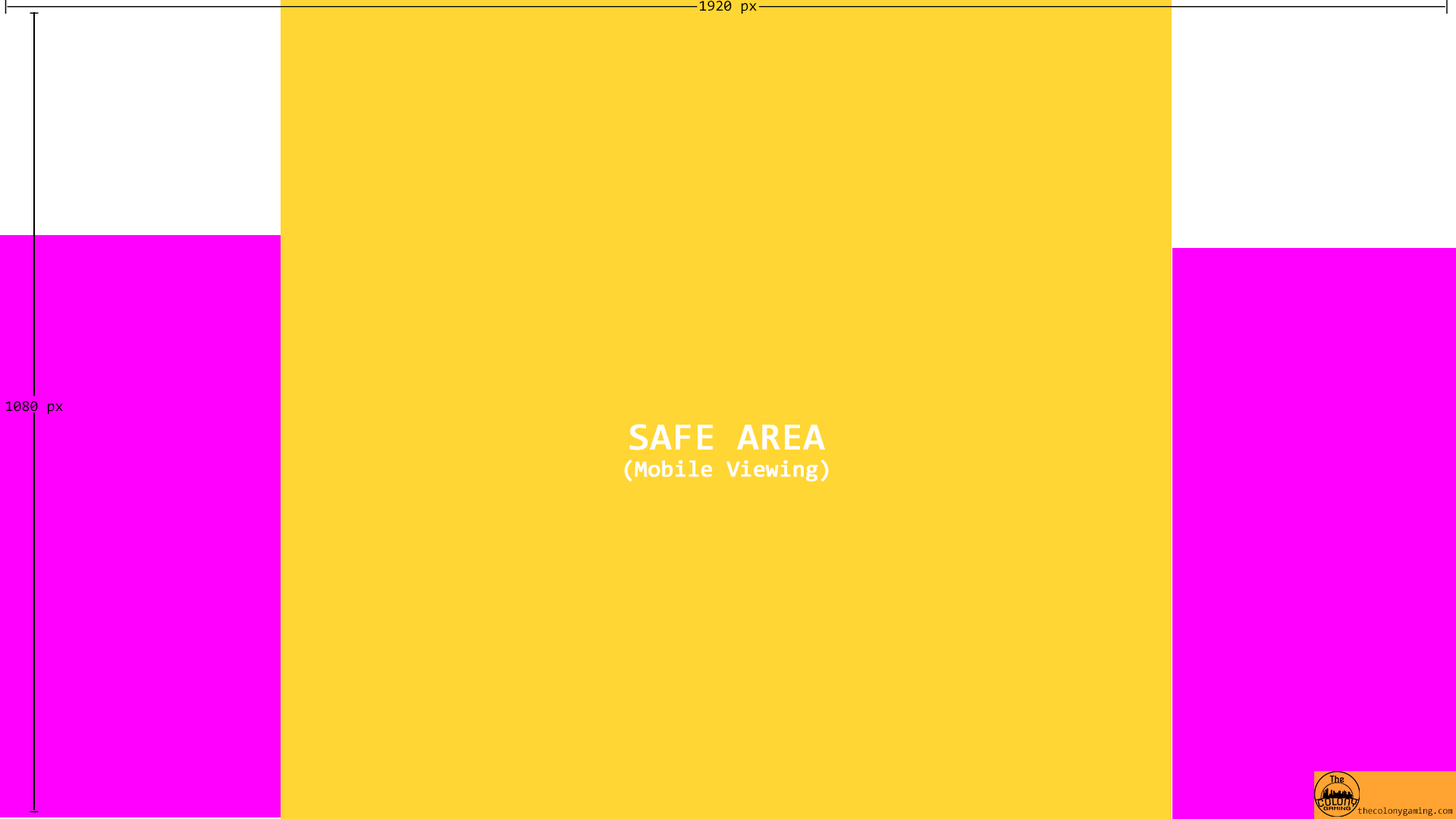
<style>
.page{position:relative;width:1456px;height:819px;background:#ffd633}
.page>*{position:absolute;margin:0}
.t1{font:15.2px "Consolas";letter-spacing:-0.3em;color:#000000}
.t2{font:15.2px "Consolas";color:#000000}
.t3{font:15.2px/13.6px "Consolas";color:#000000;font-weight:bold}
.t4{font:15.2px/2.3px "Consolas";color:#000000;font-weight:bold}
.t5{font:22.7px "Consolas";color:#ffffff;font-weight:bold}
.t6{font:37.9px/13.6px "Consolas";color:#ffffff;font-weight:bold}
.t7{font:9.1px "Consolas";color:#000000}
</style>
<div class="page">
<p class="t1" style="left:5px;top:0px;width:1443px;height:14px">|-------------------------------------------------------------------------------------------------------------------------------------------------------------------------------------- <span class="t2">1920 px</span>-------------------------------------------------------------------------------------------------------------------------------------------------------------------------------------|</p>
<p class="t3" style="left:5px;top:12px;width:58px;height:801px;text-align:center"><span class="t2">_<br></span>|<br>|<br>|<br>|<br>|<br>|<br>|<br>|<br>|<br>|<br>|<br>|<br>|<br>|<br>|<br>|<br>|<br>|<br>|<br>|<br>|<br>|<br>|<br>|<br>|<br>|<br>|<br>|<br><span class="t2">1080 px<br></span>|<br>|<br>|<br>|<br>|<br>|<br>|<br>|<br>|<br>|<br>|<br>|<br>|<br>|<br>|<br>|<br>|<br>|<br>|<br>|<br>|<br>|<br>|<br>|<br>|<br>|<br>|<br>|<br>|<br><span class="t4">_</span></p>
<p class="t5" style="left:624px;top:424px;width:205px;height:58px;text-align:center"><span class="t6">SAFE AREA<br></span>(Mobile Viewing)</p>
<p class="t7" style="left:1357px;top:807px;width:95px;height:9px">thecolonygaming.com</p>
</div>
